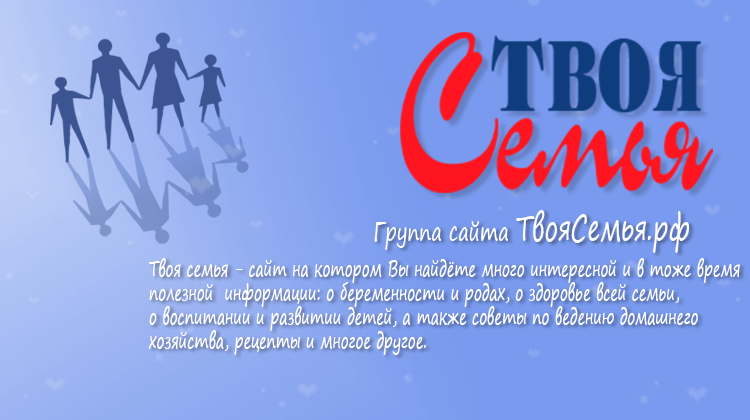
<style>
.page{position:relative;width:750px;height:420px;background:#799aee}
.page>*{position:absolute;margin:0}
.t1{font:27px "SegoePrint";color:#ffffff;scale:0.67 1}
.t2{font:36px "SegoePrint";color:#ffffff;scale:0.67 1}
.t3{font:21px/24px "SegoePrint";color:#ffffff;scale:0.67 1}
</style>
<div class="page">
<p class="t1" style="left:374px;top:210px;width:316px;height:43px">Группа сайта <span class="t2">ТвояСемья.рф</span></p>
<p class="t3" style="left:148px;top:258px;width:592px;height:97px">Твоя семья - сайт на котором Вы найдёте много интересной и в тоже время<br>полезной  информации: о беременности и родах, о здоровье всей семьи, <br>о воспитании и развитии детей, а также советы по ведению домашнего<br>хозяйства, рецепты и многое другое.</p>
</div>
